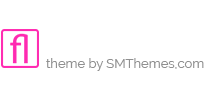
<style>
.page{position:relative;width:214px;height:95px;background:#ffffff}
.page>*{position:absolute;margin:0}
.t1{font:13px "Raleway-Regular";color:#909090}
.t2{font:25px "Raleway-Regular";color:#ffffff}
</style>
<div class="page">
<p class="t1" style="left:46px;top:35px;width:158px;height:36px"><span class="t2">MODA<br></span>theme by SMThemes,com</p>
</div>
